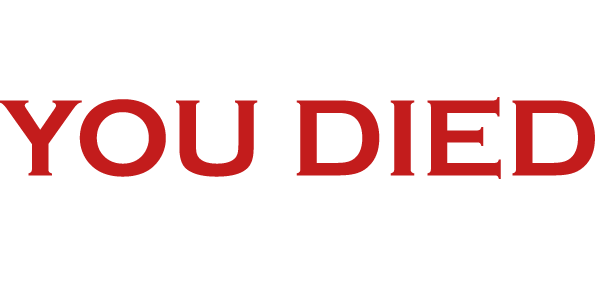
<style>
.page{position:relative;width:600px;height:300px;background:#ffffff}
.page>*{position:absolute;margin:0}
.t1{font:112px "CopperplateGothic-Bold";color:#c31c1c}
</style>
<div class="page">
<p class="t1" style="left:0px;top:97px;width:595px;height:82px">YOU DIED</p>
</div>
